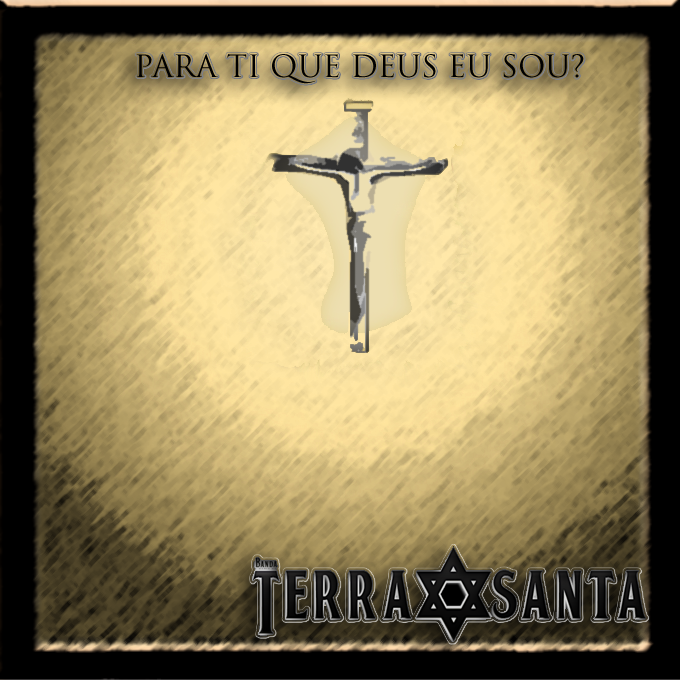
<style>
.page{position:relative;width:680px;height:680px}
.page>*{position:absolute;margin:0}
.t1{font:30px "TrajanPro-Regular";color:#000000}
</style>
<div class="page">
<p class="t1" style="left:136px;top:54px;width:448px;height:30px">PARA TI QUE DEUS EU SOU?</p>
</div>
